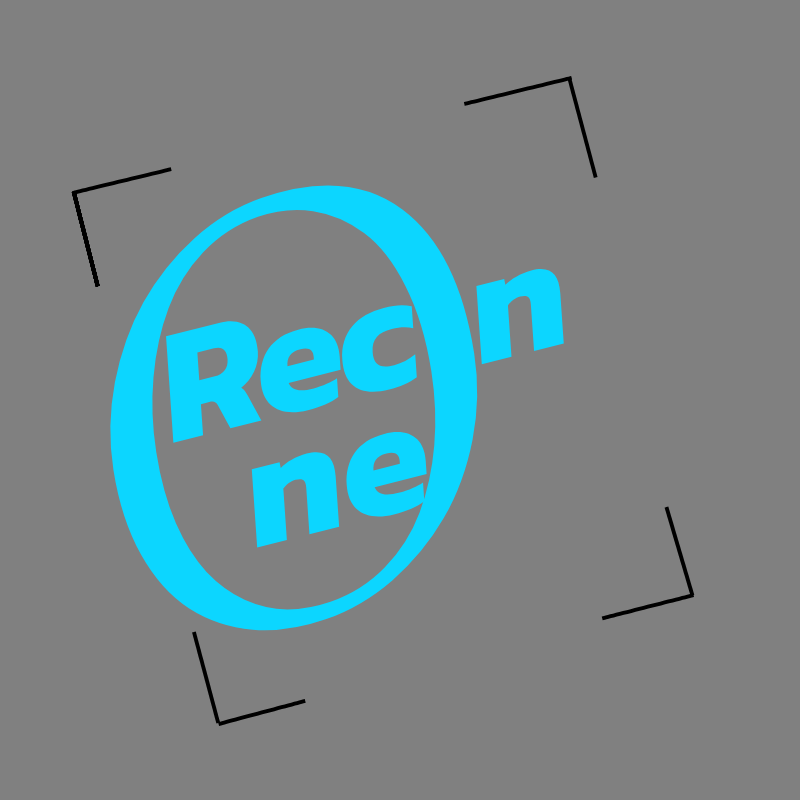
<style>
.page{position:relative;width:800px;height:800px;background:#808080}
.page>*{position:absolute;margin:0}
.t1{font:558.8px "Junge-Regular";color:#0cd6ff;font-style:italic}
.t2{font:162.9px "Kanit-Bold";color:#0cd6ff;font-style:italic}
</style>
<div class="page">
<p class="t1" style="left:110px;top:185px;width:368px;height:446px;rotate:-19deg">O</p>
<p class="t2" style="left:166px;top:269px;width:398px;height:279px;rotate:-14deg">Rec n<br> ne</p>
</div>
